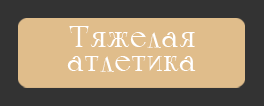
<style>
.page{position:relative;width:264px;height:106px;background:#e0bd8b}
.page>*{position:absolute;margin:0}
.t1{font:30px/24px "Calypso-Regular";color:#ffffff}
</style>
<div class="page">
<p class="t1" style="left:67px;top:26px;width:129px;height:46px;text-align:center">Тяжелая<br>атлетика</p>
</div>
